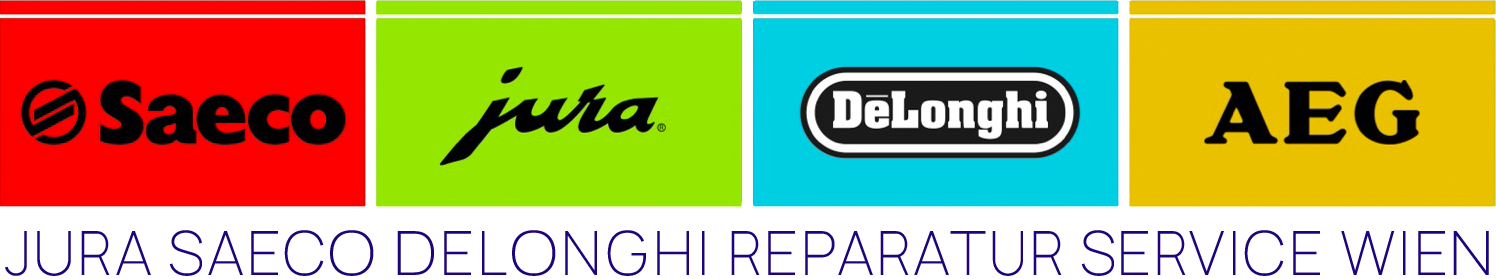
<style>
.page{position:relative;width:1496px;height:279px;background:#ffffff}
.page>*{position:absolute;margin:0}
.t1{font:61px "Manrope-ExtraLight";letter-spacing:0.05em;color:#1d047a}
.t2{font:61px "Manrope-ExtraLight";letter-spacing:0.025em;color:#1d047a}
.t3{font:61px "Manrope-ExtraLight";letter-spacing:0.05em;color:#1d047a;scale:0.9 1}
.t4{font:61px "Manrope-ExtraLight";letter-spacing:0.05em;color:#1d047a;scale:1.1 1}
.t5{font:61px "Manrope-ExtraLight";letter-spacing:0.075em;color:#1d047a}
.t6{font:61px "Manrope-ExtraLight";letter-spacing:0.025em;color:#1d047a;scale:0.9 1}
</style>
<div class="page">
<p class="t1" style="left:5px;top:230px;width:1484px;height:46px"><span class="t2">J</span>U<span class="t3">R</span>A SAEC<span class="t4">O D</span>EL<span class="t4">O</span><span class="t5">NGH</span>I <span class="t3">R</span>EPA<span class="t3">R</span>AT<span class="t3">UR</span><span class="t2"> S</span>E<span class="t6">R</span>VICE WI<span class="t2">E</span><span class="t4">N</span></p>
</div>
